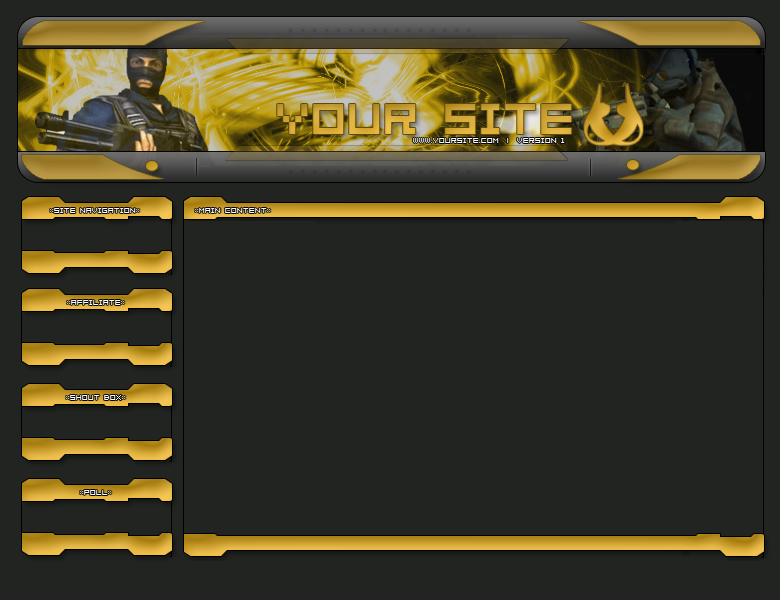
<style>
.page{position:relative;width:780px;height:600px;background:#212421}
.page>*{position:absolute;margin:0}
.t1{font:48px "04b08";color:#d7aa38}
.t2{font:8px "04b08";color:#ffffff}
</style>
<div class="page">
<p class="t1" style="left:277px;top:104px;width:295px;height:30px">Your Site</p>
<p class="t2" style="left:413px;top:138px;width:152px;height:5px">www.yoursite.com  |  Version 1</p>
<p class="t2" style="left:50px;top:208px;width:90px;height:5px">::Site Navigation::</p>
<p class="t2" style="left:195px;top:208px;width:76px;height:5px">::main content::</p>
<p class="t2" style="left:67px;top:300px;width:58px;height:5px">::affiliate::</p>
<p class="t2" style="left:66px;top:395px;width:60px;height:5px">::shout box::</p>
<p class="t2" style="left:80px;top:490px;width:32px;height:5px">::poll::</p>
</div>
